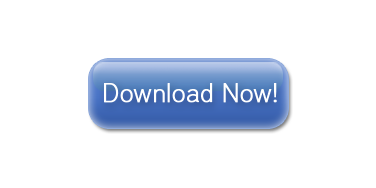
<style>
.page{position:relative;width:376px;height:188px;background:#ffffff}
.page>*{position:absolute;margin:0}
.t1{font:26px "District-Thin";color:#ffffff;font-weight:bold}
</style>
<div class="page">
<p class="t1" style="left:104px;top:83px;width:173px;height:20px">Download Now!</p>
</div>
